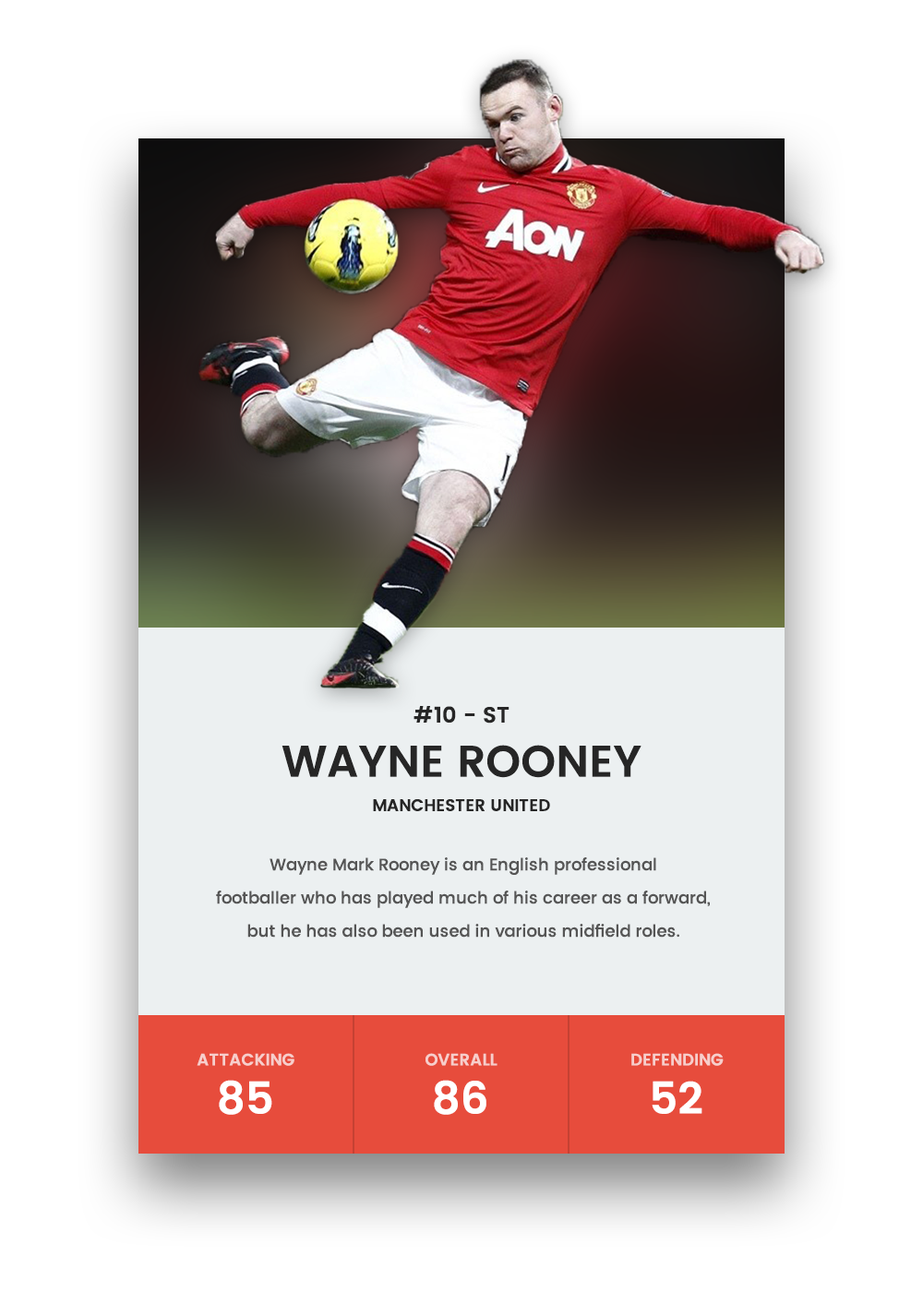
<style>
.page{position:relative;width:923px;height:1292px;background:#ffffff}
.page>*{position:absolute;margin:0}
.t1{font:22.1px "Poppins-SemiBold";color:#262626}
.t2{font:44.3px "Poppins-SemiBold";color:#262626}
.t3{font:16.6px "Poppins-SemiBold";color:#262626}
.t4{font:16.6px/33.2px "Poppins-Medium";color:#555555}
.t5{font:16.6px "Poppins-SemiBold";color:#f7cecb}
.t6{font:44.3px "Poppins-SemiBold";color:#ffffff}
</style>
<div class="page">
<p class="t1" style="left:413px;top:706px;width:96px;height:18px">#10 - ST</p>
<p class="t2" style="left:281px;top:745px;width:360px;height:33px">WAYNE ROONEY</p>
<p class="t3" style="left:373px;top:799px;width:177px;height:12px">MANCHESTER UNITED</p>
<p class="t4" style="left:216px;top:857px;width:494px;height:81px;text-align:center">Wayne Mark Rooney is an English professional<br>footballer who has played much of his career as a forward,<br>but he has also been used in various midfield roles.</p>
<p class="t5" style="left:197px;top:1053px;width:97px;height:13px">ATTACKING</p>
<p class="t5" style="left:425px;top:1053px;width:72px;height:13px">OVERALL</p>
<p class="t5" style="left:631px;top:1053px;width:93px;height:13px">DEFENDING</p>
<p class="t6" style="left:219px;top:1080px;width:53px;height:35px">85</p>
<p class="t6" style="left:434px;top:1080px;width:52px;height:35px">86</p>
<p class="t6" style="left:652px;top:1081px;width:50px;height:33px">52</p>
</div>
